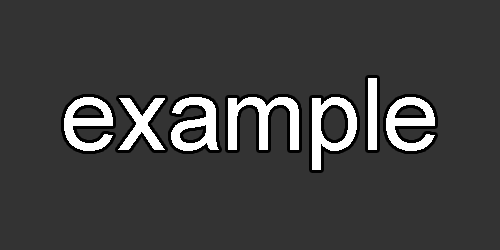
<style>
.page{position:relative;width:500px;height:250px;background:#333333}
.page>*{position:absolute;margin:0}
.t1{font:100px "ArialMT";color:#ffffff}
</style>
<div class="page">
<p class="t1" style="left:64px;top:78px;width:371px;height:92px">example</p>
</div>
